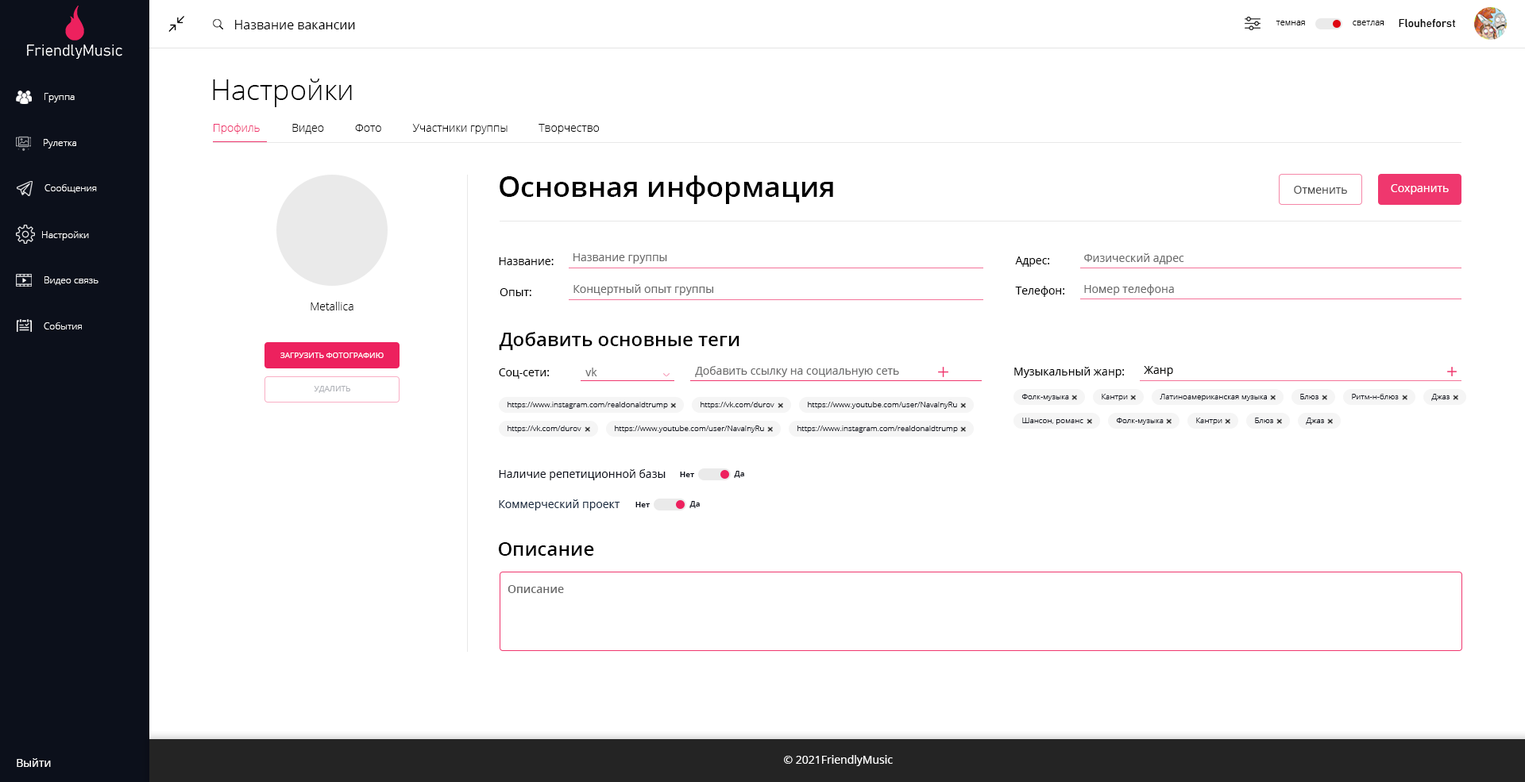
<style>
.page{position:relative;width:1525px;height:782px;background:#ffffff}
.page>*{position:absolute;margin:0}
.t1{font:12.7px "OpenSans";color:#000000}
.t2{font:8.7px "OpenSans-Light";color:#000000}
.t3{font:11.1px "Bahnschrift";color:#000000}
.t4{font:28.6px "OpenSans-Light";color:#000000}
.t5{font:9.5px "OpenSans-Light";color:#ffffff}
.t6{font:11.1px "OpenSans-Light";color:#ef376e}
.t7{font:11.1px "OpenSans-Light";color:#000000}
.t8{font:28.6px "OpenSans-Semibold";color:#000000}
.t9{font:11.1px "OpenSans";color:#4c4c4c}
.t10{font:11.1px "OpenSans";color:#ffffff}
.t11{font:11.1px "aakar-medium";color:#000000}
.t12{font:11.1px "aakar-medium";color:#6b6b6b}
.t13{font:11.1px "OpenSans";color:#000000}
.t14{font:11.1px "OpenSans";color:#6b6b6b}
.t15{font:19.1px "OpenSans-Semibold";color:#000000}
.t16{font:7.9px "OpenSans";color:#ffffff;text-transform:uppercase}
.t17{font:7.9px "OpenSans";color:#afb1b7;text-transform:uppercase}
.t18{font:7.9px "OpenSans-Light";color:#12151f}
.t19{font:11.1px "OpenSans";color:#0c101b}
.t20{font:7.9px "OpenSans-Semibold";color:#0c101b}
.t21{font:11.1px "OpenSans";color:#1a2c42}
.t22{font:11.1px "OpenSans-Semibold";color:#6b6b6b}
.t23{font:11.1px "aakar-medium";color:#ffffff}
</style>
<div class="page">
<p class="t1" style="left:235px;top:20px;width:120px;height:9px">Название вакансии</p>
<p class="t2" style="left:1275px;top:21px;width:30px;height:4px">темная</p>
<p class="t2" style="left:1352px;top:21px;width:31px;height:4px">светлая</p>
<p class="t3" style="left:1398px;top:18px;width:57px;height:10px">Flouheforst</p>
<p class="t4" style="left:213px;top:79px;width:139px;height:28px">Настройки</p>
<p class="t5" style="left:44px;top:93px;width:31px;height:9px">Группа</p>
<p class="t6" style="left:214px;top:123px;width:46px;height:11px">Профиль</p>
<p class="t7" style="left:292px;top:124px;width:32px;height:10px">Видео</p>
<p class="t7" style="left:355px;top:124px;width:26px;height:8px">Фото</p>
<p class="t7" style="left:412px;top:124px;width:95px;height:10px">Участники группы</p>
<p class="t7" style="left:538px;top:124px;width:61px;height:10px">Творчество</p>
<p class="t5" style="left:44px;top:139px;width:32px;height:9px">Рулетка</p>
<p class="t5" style="left:44px;top:184px;width:53px;height:9px">Сообщения</p>
<p class="t8" style="left:499px;top:175px;width:334px;height:29px">Основная информация</p>
<p class="t9" style="left:1294px;top:186px;width:53px;height:8px">Отменить</p>
<p class="t10" style="left:1390px;top:184px;width:58px;height:11px">Сохранить</p>
<p class="t5" style="left:42px;top:231px;width:47px;height:10px">Настройки</p>
<p class="t11" style="left:499px;top:257px;width:54px;height:8px">Название:</p>
<p class="t12" style="left:573px;top:253px;width:94px;height:11px">Название группы</p>
<p class="t13" style="left:1015px;top:256px;width:34px;height:11px">Адрес:</p>
<p class="t12" style="left:1084px;top:253px;width:100px;height:11px">Физический адрес</p>
<p class="t5" style="left:44px;top:276px;width:54px;height:9px">Видео связь</p>
<p class="t13" style="left:499px;top:288px;width:32px;height:8px">Опыт:</p>
<p class="t14" style="left:573px;top:284px;width:140px;height:11px">Концертный опыт группы</p>
<p class="t13" style="left:1015px;top:286px;width:49px;height:11px">Телефон:</p>
<p class="t14" style="left:1084px;top:284px;width:90px;height:11px">Номер телефона</p>
<p class="t7" style="left:310px;top:302px;width:43px;height:8px">Metallica</p>
<p class="t5" style="left:44px;top:322px;width:38px;height:8px">События</p>
<p class="t15" style="left:499px;top:332px;width:240px;height:18px">Добавить основные теги</p>
<p class="t16" style="left:280px;top:353px;width:104px;height:5px">Загрузить фотографию</p>
<p class="t13" style="left:499px;top:368px;width:50px;height:11px">Соц-сети:</p>
<p class="t14" style="left:585px;top:368px;width:12px;height:8px">vk</p>
<p class="t14" style="left:695px;top:366px;width:204px;height:11px">Добавить ссылку на социальную сеть</p>
<p class="t13" style="left:1014px;top:367px;width:110px;height:11px">Музыкальный жанр:</p>
<p class="t13" style="left:1143px;top:366px;width:30px;height:10px">Жанр</p>
<p class="t17" style="left:314px;top:386px;width:36px;height:7px">Удалить</p>
<p class="t18" style="left:507px;top:402px;width:161px;height:7px">https://www.instagram.com/realdonaldtrump</p>
<p class="t18" style="left:700px;top:402px;width:74px;height:7px">https://vk.com/durov</p>
<p class="t18" style="left:808px;top:402px;width:149px;height:7px">https://www.youtube.com/user/NavalnyRu</p>
<p class="t18" style="left:1021px;top:394px;width:48px;height:7px">Фолк-музыка</p>
<p class="t18" style="left:1101px;top:394px;width:27px;height:7px">Кантри</p>
<p class="t18" style="left:1159px;top:394px;width:108px;height:7px">Латиноамериканская музыка</p>
<p class="t18" style="left:1300px;top:394px;width:18px;height:5px">Блюз</p>
<p class="t18" style="left:1351px;top:394px;width:47px;height:5px">Ритм-н-блюз</p>
<p class="t18" style="left:1431px;top:394px;width:18px;height:7px">Джаз</p>
<p class="t18" style="left:507px;top:426px;width:74px;height:7px">https://vk.com/durov</p>
<p class="t18" style="left:615px;top:426px;width:149px;height:7px">https://www.youtube.com/user/NavalnyRu</p>
<p class="t18" style="left:797px;top:426px;width:161px;height:7px">https://www.instagram.com/realdonaldtrump</p>
<p class="t18" style="left:1022px;top:418px;width:61px;height:7px">Шансон, романс</p>
<p class="t18" style="left:1116px;top:418px;width:47px;height:7px">Фолк-музыка</p>
<p class="t18" style="left:1196px;top:418px;width:26px;height:7px">Кантри</p>
<p class="t18" style="left:1255px;top:418px;width:18px;height:5px">Блюз</p>
<p class="t18" style="left:1305px;top:418px;width:19px;height:7px">Джаз</p>
<p class="t19" style="left:499px;top:469px;width:166px;height:11px">Наличие репетиционной базы</p>
<p class="t20" style="left:680px;top:472px;width:14px;height:5px">Нет</p>
<p class="t20" style="left:734px;top:471px;width:10px;height:7px">Да</p>
<p class="t21" style="left:499px;top:499px;width:121px;height:12px">Коммерческий проект</p>
<p class="t20" style="left:635px;top:502px;width:15px;height:5px">Нет</p>
<p class="t20" style="left:689px;top:501px;width:11px;height:7px">Да</p>
<p class="t15" style="left:498px;top:542px;width:96px;height:14px">Описание</p>
<p class="t22" style="left:507px;top:585px;width:57px;height:8px">Описание</p>
<p class="t10" style="left:17px;top:758px;width:34px;height:9px">Выйти</p>
<p class="t23" style="left:784px;top:755px;width:109px;height:11px">© 2021FriendlyMusic</p>
</div>
